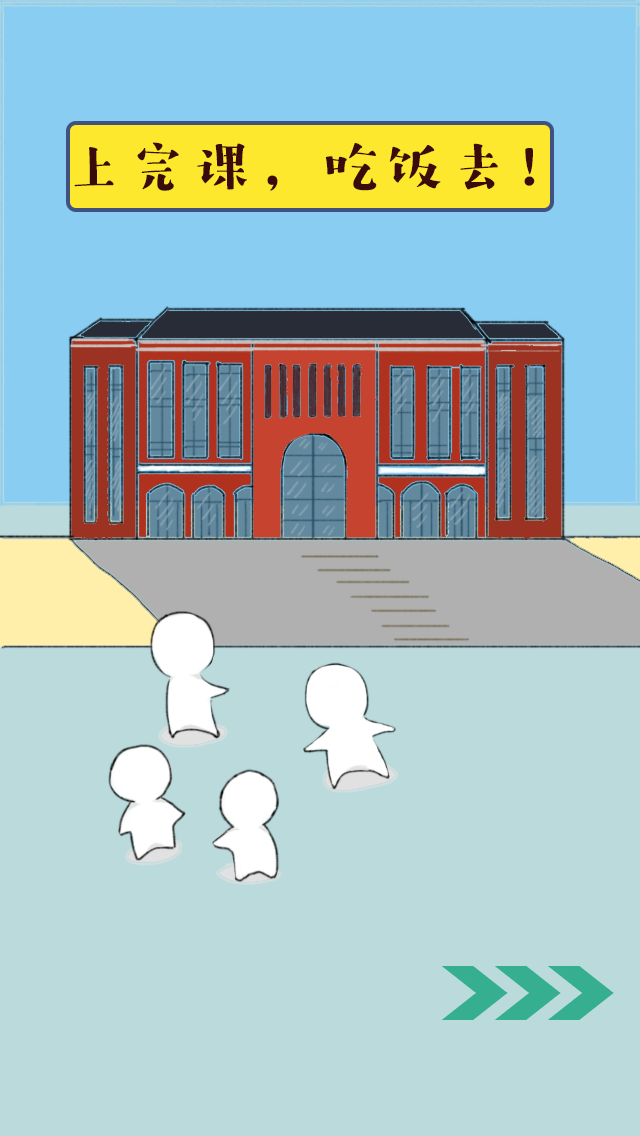
<style>
.page{position:relative;width:640px;height:1136px;background:#bbdadc}
.page>*{position:absolute;margin:0}
.t1{font:58.3px "HYZiYanHuanLeSongW";letter-spacing:0.1em;color:#390b0b}
</style>
<div class="page">
<p class="t1" style="left:74px;top:142px;width:461px;height:49px">上完课，吃饭去！</p>
</div>
